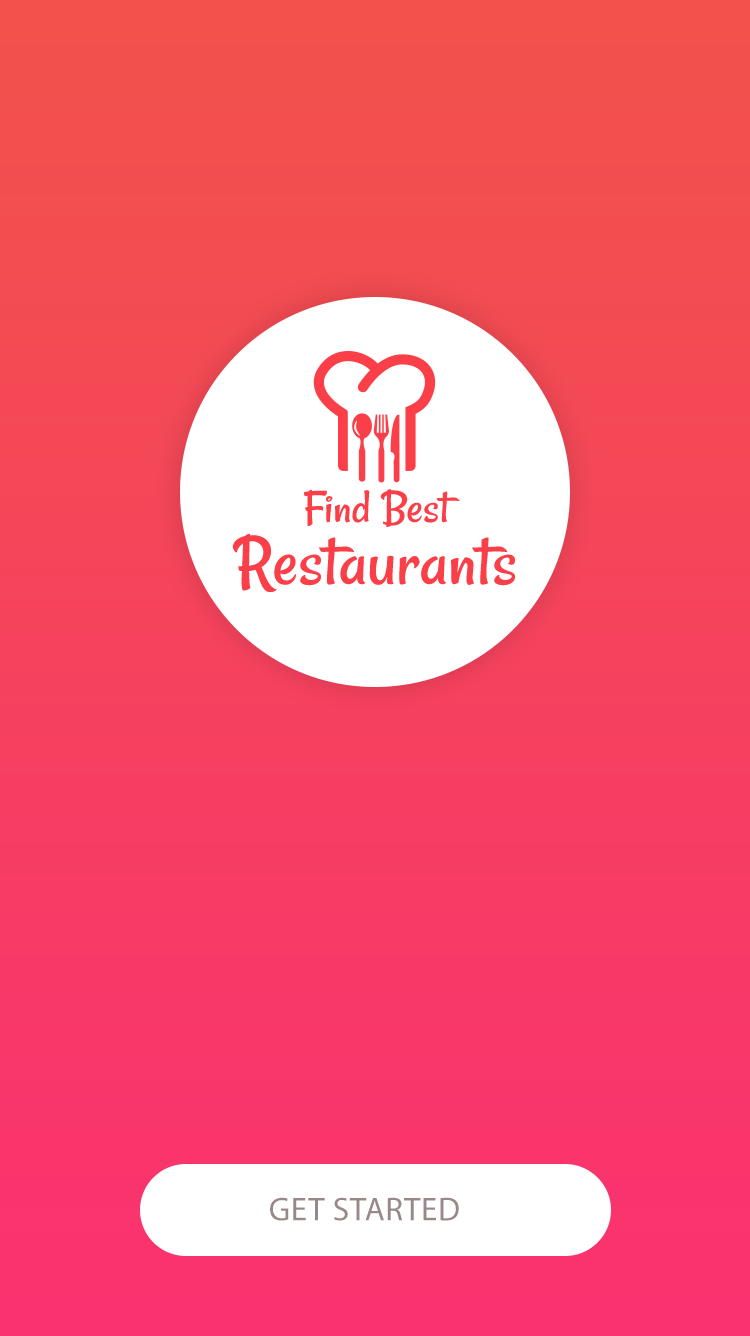
<style>
.page{position:relative;width:750px;height:1336px}
.page>*{position:absolute;margin:0}
.t1{font:73.2px/62.2px "Rancho";color:#fa3f48;scale:1.07 1}
.t2{font:47.6px/62.2px "Rancho";color:#fa3f48;scale:1.07 1}
.t3{font:33px "MyriadPro-Regular";letter-spacing:0.02em;color:#998888;text-transform:uppercase}
</style>
<div class="page">
<p class="t1" style="left:232px;top:489px;width:283px;height:103px;text-align:center"><span class="t2">Find Best<br></span>Restaurants</p>
<p class="t3" style="left:270px;top:1197px;width:189px;height:24px">Get Started</p>
</div>
